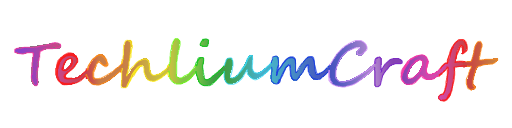
<style>
.page{position:relative;width:512px;height:128px;background:#ffffff}
.page>*{position:absolute;margin:0}
.t1{font:60px "SegoeScript-Bold"}
</style>
<div class="page">
<p class="t1" style="left:15px;top:39px;width:483px;height:62px">TechliumCraft</p>
</div>
